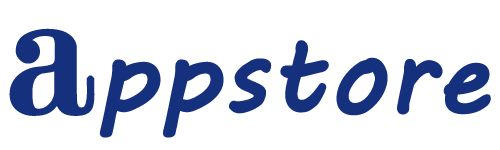
<style>
.page{position:relative;width:500px;height:150px;background:#ffffff}
.page>*{position:absolute;margin:0}
.t1{font:108.3px "MVBoli";color:#15317e;font-weight:bold}
.t2{font:187.5px "Modern-Regular";color:#15317e;font-weight:bold}
</style>
<div class="page">
<p class="t1" style="left:9px;top:28px;width:482px;height:110px"><span class="t2">a</span>ppstore</p>
</div>
